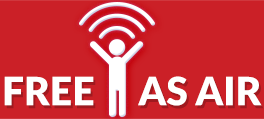
<style>
.page{position:relative;width:264px;height:119px;background:#cb2027}
.page>*{position:absolute;margin:0}
.t1{font:39px "Lato-Black";color:#ffffff;text-transform:uppercase}
</style>
<div class="page">
<p class="t1" style="left:4px;top:76px;width:258px;height:30px">Free     as air</p>
</div>
